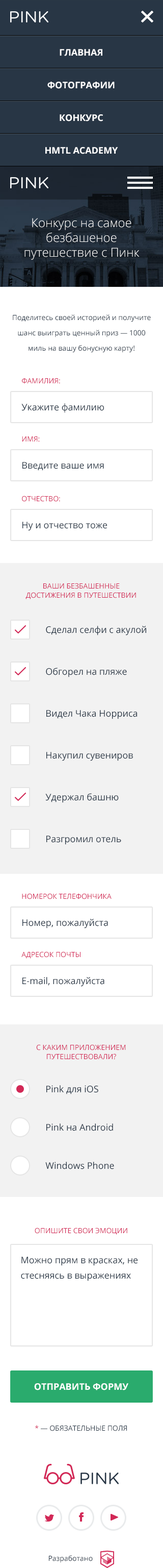
<style>
.page{position:relative;width:163px;height:1568px;background:#ffffff}
.page>*{position:absolute;margin:0}
.t1{font:9.2px/16.3px "OpenSans-Bold";color:#ffffff;text-transform:uppercase}
.t2{font:12.2px "OpenSans-Light";color:#ffffff}
.t3{font:7.1px/15.3px "OpenSans";color:#283645}
.t4{font:7.1px "OpenSans";color:#d22856;text-transform:uppercase}
.t5{font:9.2px "OpenSans";color:#283645}
.t6{font:7.1px/9.2px "OpenSans";color:#d22856;text-transform:uppercase}
.t7{font:9.2px/15.3px "OpenSans";color:#283645}
.t8{font:9.2px "OpenSans-Bold";color:#ffffff;text-transform:uppercase}
.t9{font:7.1px "OpenSans";color:#283645;text-transform:uppercase}
.t10{font:7.1px "OpenSans";color:#283645}
</style>
<div class="page">
<p class="t1" style="left:45px;top:49px;width:73px;height:105px;text-align:center">Главная<br><br>Фотографии<br><br>Конкурс<br><br>HMTL Academy</p>
<p class="t2" style="left:24px;top:218px;width:116px;height:42px;text-align:center">Конкурс на самое безбашеное путешествие с Пинк</p>
<p class="t3" style="left:13px;top:314px;width:138px;height:39px;text-align:center">Поделитесь своей историей и получите шанс выиграть ценный приз — 1000 миль на вашу бонусную карту! Пожалуйста, заполните форму ниже:</p>
<p class="t4" style="left:22px;top:378px;width:38px;height:6px">Фамилия:</p>
<p class="t5" style="left:21px;top:403px;width:83px;height:10px">Укажите фамилию</p>
<p class="t4" style="left:22px;top:436px;width:18px;height:6px">Имя:</p>
<p class="t5" style="left:22px;top:462px;width:82px;height:9px">Введите ваше имя</p>
<p class="t4" style="left:22px;top:496px;width:38px;height:6px">Отчество:</p>
<p class="t5" style="left:22px;top:522px;width:85px;height:9px">Ну и отчество тоже</p>
<p class="t6" style="left:26px;top:583px;width:110px;height:16px;text-align:center">Ваши безбашенные<br>достижения в путешествии</p>
<p class="t5" style="left:46px;top:626px;width:100px;height:9px">Сделал селфи с акулой</p>
<p class="t5" style="left:46px;top:668px;width:81px;height:9px">Обгорел на пляже</p>
<p class="t5" style="left:46px;top:710px;width:91px;height:9px">Видел Чака Норриса</p>
<p class="t5" style="left:46px;top:752px;width:87px;height:9px">Накупил сувениров</p>
<p class="t5" style="left:45px;top:793px;width:74px;height:10px">Удержал башню</p>
<p class="t5" style="left:46px;top:836px;width:75px;height:9px">Разгромил отель</p>
<p class="t4" style="left:22px;top:893px;width:90px;height:6px">Номерок телефончика</p>
<p class="t5" style="left:22px;top:919px;width:86px;height:9px">Номер, пожалуйста</p>
<p class="t4" style="left:21px;top:951px;width:60px;height:8px">адресок почты</p>
<p class="t5" style="left:22px;top:977px;width:83px;height:10px">E-mail, пожалуйста</p>
<p class="t6" style="left:36px;top:1044px;width:90px;height:16px;text-align:center">С каким приложением<br>путешествовали?</p>
<p class="t5" style="left:46px;top:1085px;width:53px;height:9px">Pink для iOS</p>
<p class="t5" style="left:46px;top:1123px;width:67px;height:8px">Pink на Android</p>
<p class="t5" style="left:45px;top:1162px;width:69px;height:7px">Windows Phone</p>
<p class="t4" style="left:35px;top:1228px;width:93px;height:7px">Опишите свои эмоции</p>
<p class="t7" style="left:21px;top:1257px;width:117px;height:24px">Можно прям в красках, не стесняясь в выражениях</p>
<p class="t8" style="left:34px;top:1383px;width:95px;height:7px">Отправить форму</p>
<p class="t9" style="left:35px;top:1425px;width:92px;height:6px"><span class="t4">*</span> — обязательные поля</p>
<p class="t10" style="left:49px;top:1555px;width:44px;height:8px">Разработано</p>
</div>
